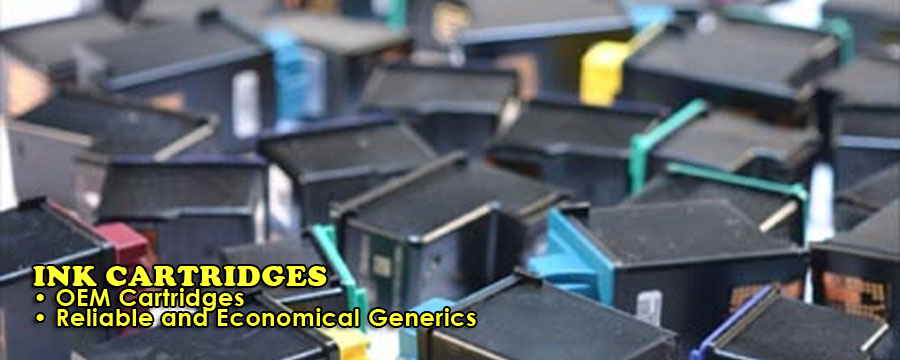
<style>
.page{position:relative;width:900px;height:360px}
.page>*{position:absolute;margin:0}
.t1{font:24px/8px "CenturyGothic-Bold";letter-spacing:0.025em;color:#ffff33}
.t2{font:30px/8px "CooperBlack";letter-spacing:0.025em;color:#ffff33}
</style>
<div class="page">
<p class="t1" style="left:33px;top:266px;width:443px;height:60px"><span class="t2">INK CARTRIDGES<br></span>• OEM Cartridges<br>• Reliable and Economical Generics</p>
</div>
